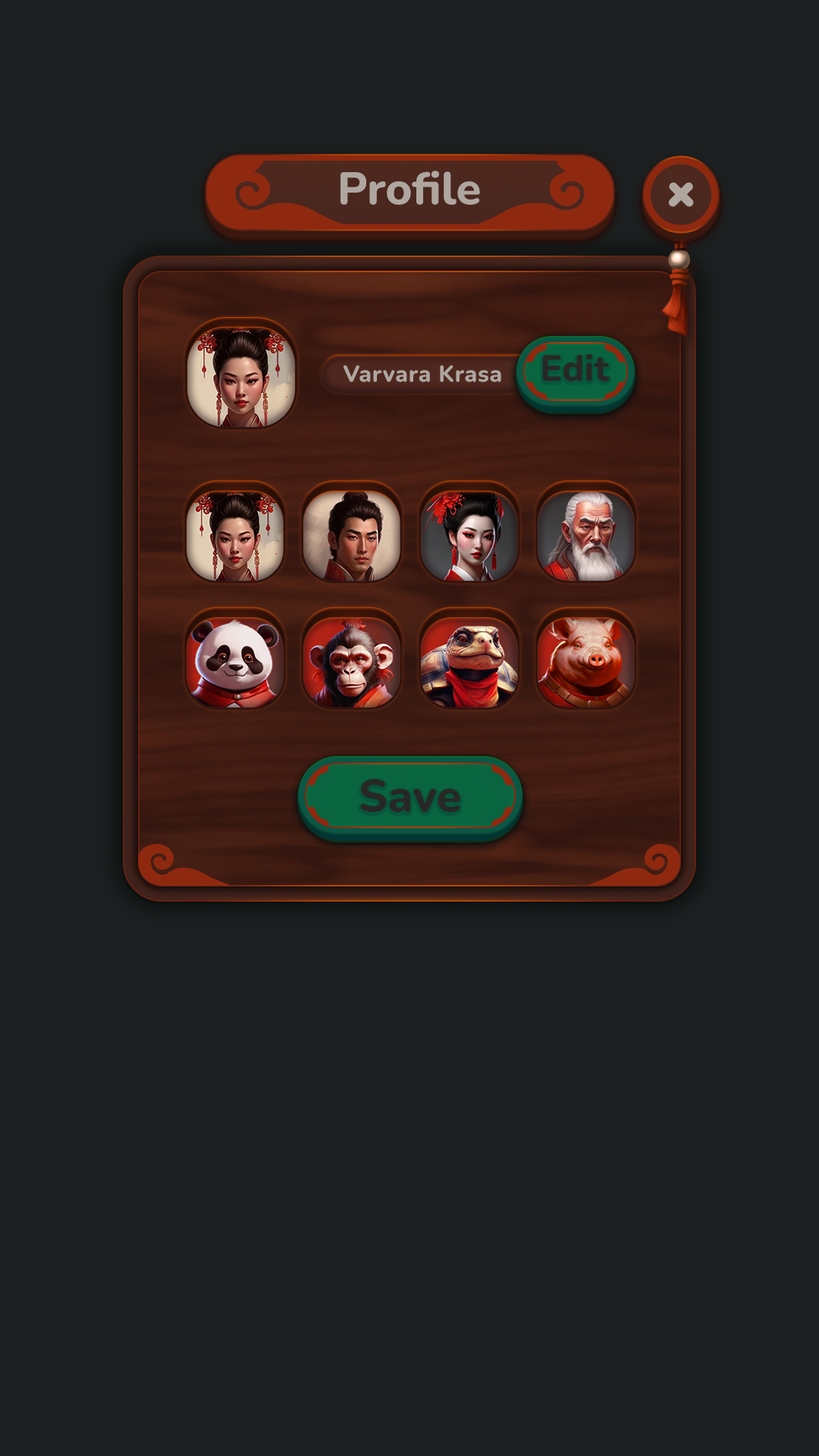
<style>
.page{position:relative;width:819px;height:1456px;background:#1c1f1f}
.page>*{position:absolute;margin:0}
.t1{font:45.5px "Nunito-ExtraBold";color:#afa6a0}
.t2{font:22.7px "Nunito-ExtraBold";letter-spacing:0.025em;color:#afa6a0}
.t3{font:36.4px "Nunito-ExtraBold";color:#272825}
.t4{font:45.5px "Nunito-ExtraBold";color:#272825}
</style>
<div class="page">
<p class="t1" style="left:340px;top:171px;width:140px;height:34px">Profile</p>
<p class="t2" style="left:344px;top:365px;width:157px;height:17px">Varvara Krasa</p>
<p class="t3" style="left:542px;top:354px;width:68px;height:27px">Edit</p>
<p class="t4" style="left:360px;top:779px;width:100px;height:33px">Save</p>
</div>
